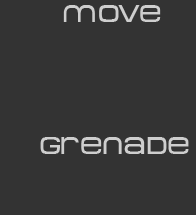
<style>
.page{position:relative;width:196px;height:215px;background:#333333}
.page>*{position:absolute;margin:0}
.t1{font:23.7px "MetroDF";color:#cecece}
</style>
<div class="page">
<p class="t1" style="left:63px;top:5px;width:98px;height:17px">move</p>
<p class="t1" style="left:40px;top:137px;width:149px;height:17px">grenade</p>
</div>
